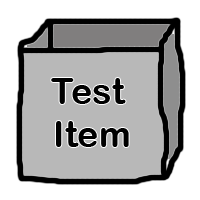
<style>
.page{position:relative;width:200px;height:200px;background:#b8b8b8}
.page>*{position:absolute;margin:0}
.t1{font:36px "ArialRoundedMTBold";color:#000000}
</style>
<div class="page">
<p class="t1" style="left:51px;top:78px;width:78px;height:69px;text-align:center">Test <br>Item</p>
</div>
